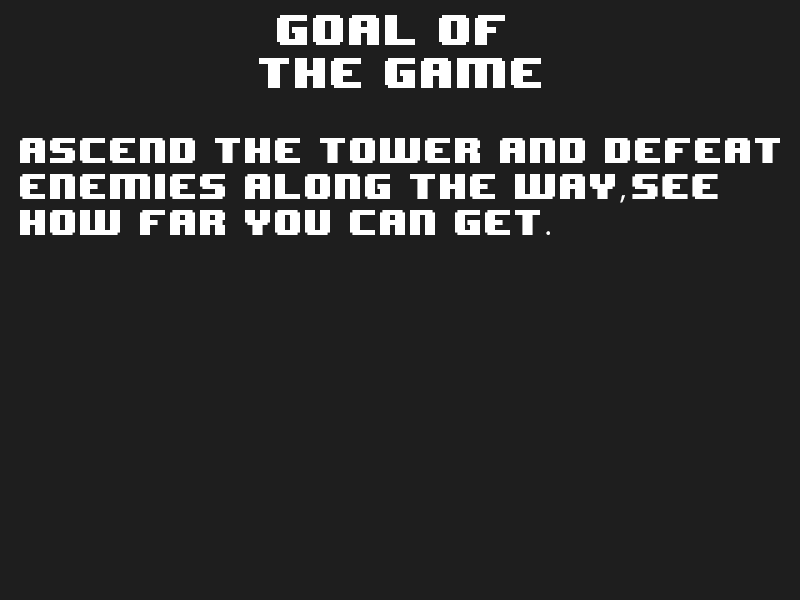
<style>
.page{position:relative;width:800px;height:600px;background:#1e1e1e}
.page>*{position:absolute;margin:0}
.t1{font:36px "8BITWONDERNominal";color:#ffffff}
.t2{font:30px "8BITWONDERNominal";color:#ffffff}
.t3{font:30px "MyriadPro-Regular";color:#ffffff}
</style>
<div class="page">
<p class="t1" style="left:259px;top:15px;width:282px;height:73px;text-align:center">goal of <br>the game</p>
<p class="t2" style="left:20px;top:138px;width:760px;height:97px">ascend the tower and defeat<br>enemies along the way<span class="t3">, </span>see <br>how far you can get<span class="t3">.</span></p>
</div>
